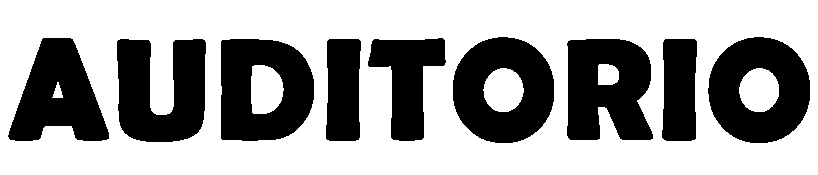
<style>
.page{position:relative;width:818px;height:175px;background:#ffffff}
.page>*{position:absolute;margin:0}
.t1{font:140px "BerlinSansFBDemi-Bold";letter-spacing:0.02em;color:#000000;font-weight:bold}
</style>
<div class="page">
<p class="t1" style="left:8px;top:37px;width:802px;height:106px">AUDITORIO</p>
</div>
